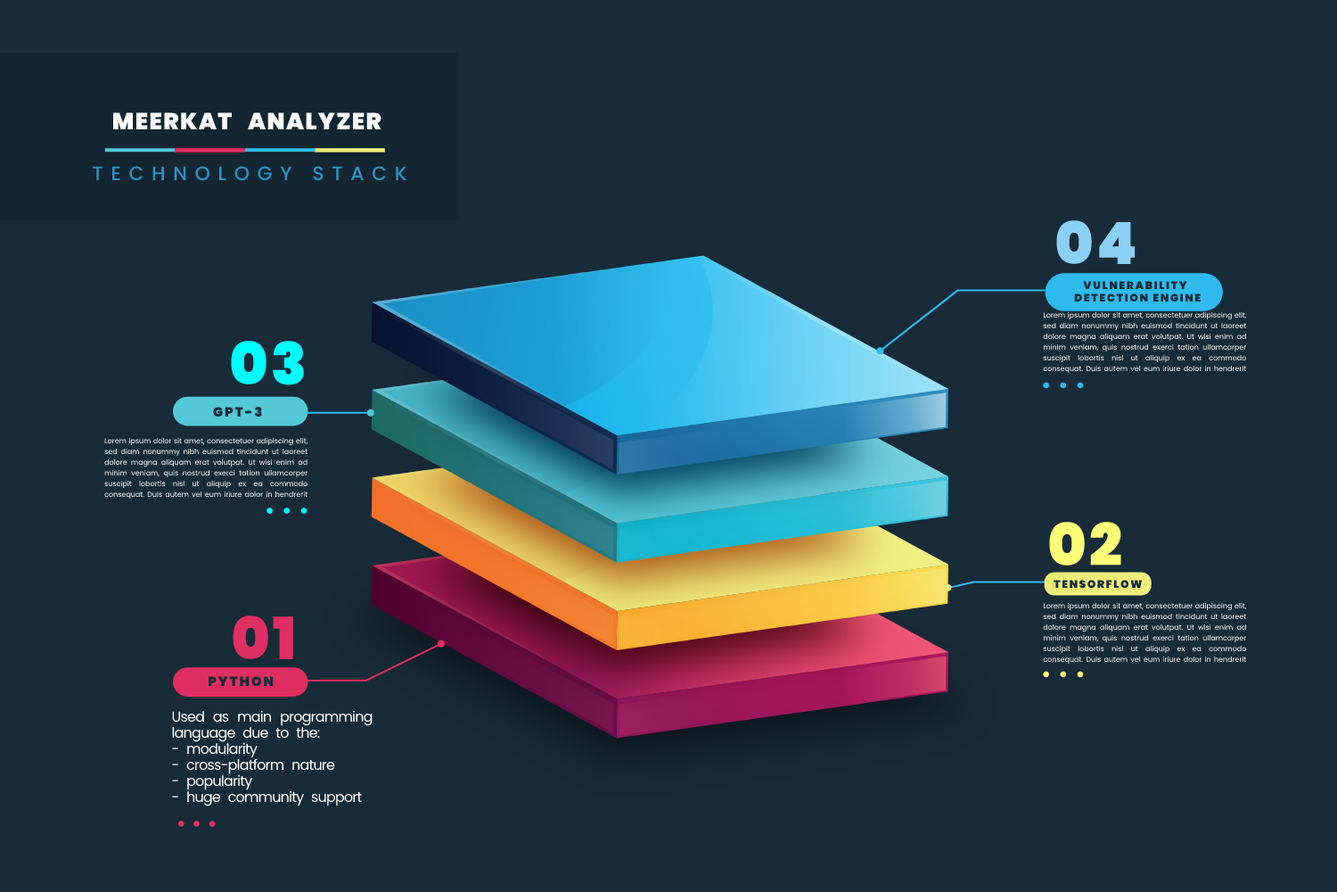
<style>
.page{position:relative;width:1337px;height:892px;background:#182b38}
.page>*{position:absolute;margin:0}
.t1{font:23.2px "Poppins-Black";letter-spacing:0.05em;color:#ffffff;text-transform:uppercase}
.t2{font:19.6px "Poppins-Medium";letter-spacing:0.39em;color:#2f92c1;text-transform:uppercase}
.t3{font:58.3px "Poppins-Black";letter-spacing:0.05em;color:#8acff4;text-transform:uppercase}
.t4{font:10.6px "Poppins-Black";letter-spacing:0.14em;color:#182c39;text-transform:uppercase}
.t5{font:7.1px/10.7px "Poppins-Regular";color:#ffffff}
.t6{font:58.3px "Poppins-Black";letter-spacing:0.05em;color:#00ffff;text-transform:uppercase}
.t7{font:13.1px "Poppins-Black";letter-spacing:0.14em;color:#182c39;text-transform:uppercase}
.t8{font:58.3px "Poppins-Black";letter-spacing:0.05em;color:#fdff76;text-transform:uppercase}
.t9{font:10.7px "Poppins-Black";letter-spacing:0.14em;color:#182c39;text-transform:uppercase}
.t10{font:58.3px "Poppins-Black";letter-spacing:0.05em;color:#e02f62;text-transform:uppercase}
.t11{font:14.3px/16px "Poppins-Regular";letter-spacing:0.109em;color:#ffffff}
</style>
<div class="page">
<p class="t1" style="left:112px;top:112px;width:120px;height:17px">MEERKAT</p>
<p class="t1" style="left:248px;top:112px;width:134px;height:17px">Analyzer</p>
<p class="t2" style="left:93px;top:166px;width:314px;height:15px">Technology stack</p>
<p class="t3" style="left:1057px;top:220px;width:79px;height:44px">04</p>
<p class="t4" style="left:1074px;top:281px;width:127px;height:21px;text-align:center">VUlnerability <br>detection engine</p>
<p class="t5" style="left:1043px;top:311px;width:204px;height:63px;text-align:justify">Lorem ipsum dolor sit amet, consectetuer adipiscing elit, sed diam nonummy nibh euismod tincidunt ut laoreet dolore magna aliquam erat volutpat. Ut wisi enim ad minim veniam, quis nostrud exerci tation ullamcorper suscipit lobortis nisl ut aliquip ex ea commodo consequat. Duis autem vel eum iriure dolor in hendrerit in</p>
<p class="t6" style="left:231px;top:341px;width:73px;height:44px">03</p>
<p class="t7" style="left:213px;top:407px;width:49px;height:10px">GPT-3</p>
<p class="t5" style="left:104px;top:437px;width:204px;height:62px;text-align:justify">Lorem ipsum dolor sit amet, consectetuer adipiscing elit, sed diam nonummy nibh euismod tincidunt ut laoreet dolore magna aliquam erat volutpat. Ut wisi enim ad minim veniam, quis nostrud exerci tation ullamcorper suscipit lobortis nisl ut aliquip ex ea commodo consequat. Duis autem vel eum iriure dolor in hendrerit in</p>
<p class="t8" style="left:1049px;top:522px;width:73px;height:43px">02</p>
<p class="t9" style="left:1054px;top:580px;width:89px;height:8px">Tensorflow</p>
<p class="t5" style="left:1043px;top:602px;width:204px;height:62px;text-align:justify">Lorem ipsum dolor sit amet, consectetuer adipiscing elit, sed diam nonummy nibh euismod tincidunt ut laoreet dolore magna aliquam erat volutpat. Ut wisi enim ad minim veniam, quis nostrud exerci tation ullamcorper suscipit lobortis nisl ut aliquip ex ea commodo consequat. Duis autem vel eum iriure dolor in hendrerit in</p>
<p class="t10" style="left:233px;top:615px;width:60px;height:44px">01</p>
<p class="t7" style="left:208px;top:676px;width:66px;height:11px">Python</p>
<p class="t11" style="left:172px;top:710px;width:201px;height:96px;text-align:justify">Used as main programming language due to the:<br>- modularity<br>- cross-platform nature<br>- popularity<br>- huge community support</p>
</div>
